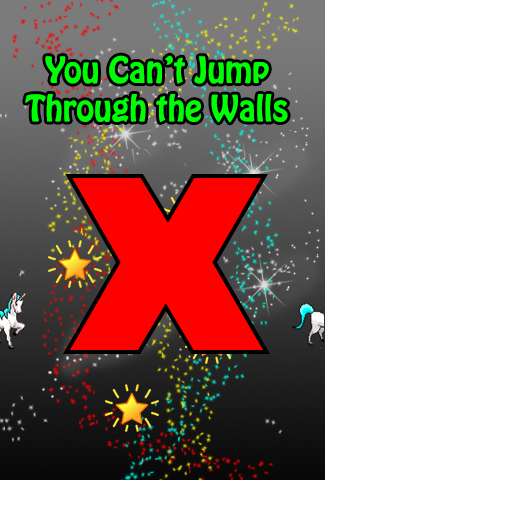
<style>
.page{position:relative;width:512px;height:512px;background:#ffffff}
.page>*{position:absolute;margin:0}
.t1{font:32px "HoboStd";color:#00ff06}
</style>
<div class="page">
<p class="t1" style="left:25px;top:55px;width:263px;height:68px;text-align:center">You Can’t Jump<br>Through the Walls</p>
</div>
